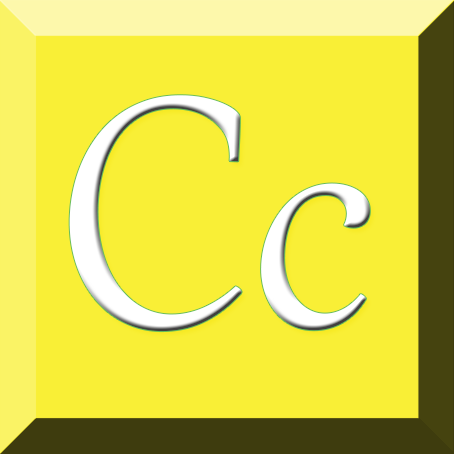
<style>
.page{position:relative;width:454px;height:454px;background:#f9ef36}
.page>*{position:absolute;margin:0}
.t1{font:400px "Gabriola";color:#ffffff}
</style>
<div class="page">
<p class="t1" style="left:69px;top:95px;width:301px;height:237px">Cc</p>
</div>
